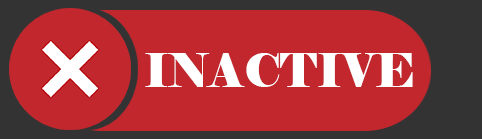
<style>
.page{position:relative;width:482px;height:139px;background:#c1272d}
.page>*{position:absolute;margin:0}
.t1{font:45.8px "Elephant-Regular";color:#ffffff}
</style>
<div class="page">
<p class="t1" style="left:145px;top:53px;width:268px;height:34px">INACTIVE</p>
</div>
